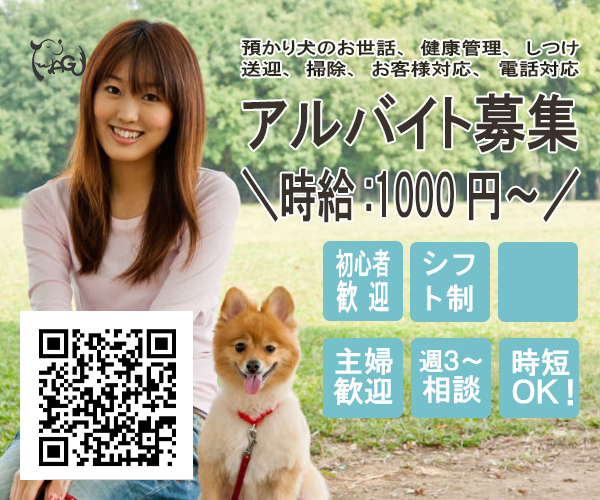
<style>
.page{position:relative;width:600px;height:500px}
.page>*{position:absolute;margin:0}
.t1{font:17.2px/21.6px "HGPGothicE";color:#39322b;scale:1.19 1}
.t2{font:17.2px/21.6px "HGPGothicE";letter-spacing:0.04em;color:#39322b;scale:1.19 1}
.t3{font:17.2px/21.6px "HGPGothicE";letter-spacing:0.12em;color:#39322b;scale:1.19 1}
.t4{font:62px "HGPGothicE";color:#39322b;scale:0.86 1}
.t5{font:57.4px "HGPGothicE";color:#39322b;scale:0.66 1}
.t6{font:30px/30px "HGPGothicE";color:#ffffff;scale:0.62 1}
.t7{font:35px/30px "HGPGothicE";letter-spacing:0.48em;color:#ffffff;scale:0.62 1}
.t8{font:30px/35px "HGPGothicE";letter-spacing:0.1em;color:#ffffff}
.t9{font:30px/30px "HGPGothicE";color:#ffffff}
.t10{font:25px/25px "HGPGothicE";color:#ffffff}
.t11{font:30px "HGPGothicE";color:#ffffff}
.t12{font:30px "HGPGothicE";letter-spacing:-0.18em;color:#ffffff}
.t13{font:30px "HGPGothicE";letter-spacing:-0.3em;color:#ffffff}
</style>
<div class="page">
<p class="t1" style="left:241px;top:39px;width:338px;height:39px">預かり犬のお世話、健康管理、しつけ<br>送迎、掃除<span class="t2">、</span>お客様対応<span class="t3">、</span>電話対応</p>
<p class="t4" style="left:243px;top:93px;width:335px;height:60px">アルバイト募集</p>
<p class="t5" style="left:242px;top:168px;width:338px;height:55px">＼時給:1000円〜／</p>
<p class="t6" style="left:336px;top:249px;width:54px;height:65px;text-align:center">初心者<br><span class="t7">歓迎</span></p>
<p class="t8" style="left:423px;top:250px;width:52px;height:62px;text-align:center">シフ<br>ト制</p>
<p class="t9" style="left:333px;top:347px;width:60px;height:59px;text-align:center">主婦<br>歓迎</p>
<p class="t10" style="left:419px;top:350px;width:63px;height:54px;text-align:center">週３～<br><span class="t9">相談</span></p>
<p class="t11" style="left:512px;top:348px;width:58px;height:29px">時短</p>
<p class="t11" style="left:512px;top:379px;width:61px;height:27px">Ｏ<span class="t12">Ｋ</span><span class="t13">！</span></p>
</div>
